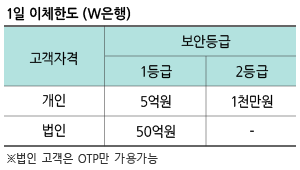
<style>
.page{position:relative;width:300px;height:170px;background:#ffffff}
.page>*{position:absolute;margin:0}
.t1{font:14px "NanumGothicBold";color:#000000;scale:0.95 1}
.t2{font:14px "NanumGothic";color:#000000;scale:0.95 1}
.t3{font:14px/30px "NanumGothic";color:#000000;scale:0.95 1}
.t4{font:14px/41.7px "NanumGothic";color:#000000;scale:0.95 1}
</style>
<div class="page">
<p class="t1" style="left:7px;top:6px;width:124px;height:15px">1일 이체한도 (W은행)</p>
<p class="t2" style="left:181px;top:34px;width:50px;height:15px">보안등급</p>
<p class="t3" style="left:29px;top:51px;width:48px;height:86px;text-align:center"><span class="t4">고객자격<br></span>개인<br>법인</p>
<p class="t3" style="left:136px;top:65px;width:39px;height:74px;text-align:center">1등급<br>5억원<br>50억원</p>
<p class="t3" style="left:232px;top:65px;width:41px;height:67px;text-align:center">2등급<br>1천만원<br>-</p>
</div>
